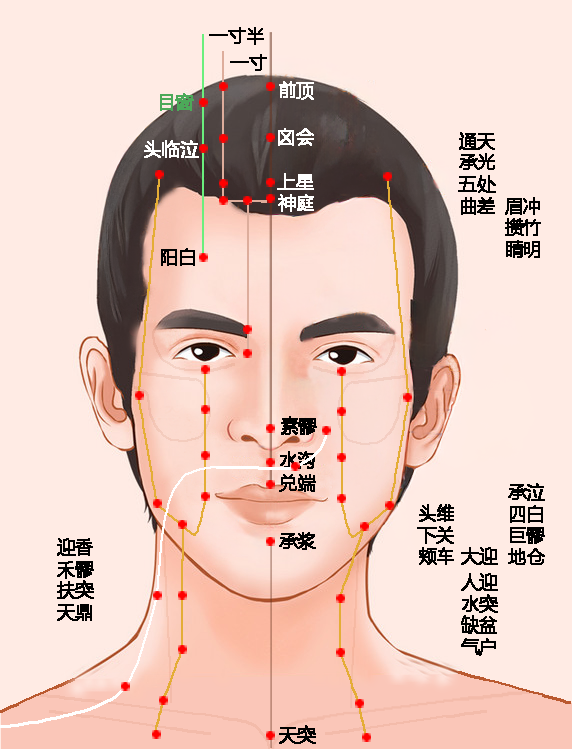
<style>
.page{position:relative;width:572px;height:749px;background:#ffebe4}
.page>*{position:absolute;margin:0}
.t1{font:18px "MicrosoftYaHei";color:#000000;font-weight:bold}
.t2{font:18px "MicrosoftYaHei";color:#ffffff;font-weight:bold}
.t3{font:18px "MicrosoftYaHei";color:#4ca959;font-weight:bold}
</style>
<div class="page">
<p class="t1" style="left:209px;top:27px;width:55px;height:18px">一寸半</p>
<p class="t1" style="left:230px;top:54px;width:37px;height:17px">一寸</p>
<p class="t2" style="left:279px;top:81px;width:35px;height:19px">前顶</p>
<p class="t3" style="left:160px;top:93px;width:34px;height:18px">目窗</p>
<p class="t2" style="left:278px;top:128px;width:36px;height:18px">囟会</p>
<p class="t1" style="left:458px;top:132px;width:38px;height:83px">通天<br>承光<br>五处<br>曲差</p>
<p class="t2" style="left:144px;top:140px;width:55px;height:18px">头临泣</p>
<p class="t2" style="left:277px;top:173px;width:37px;height:17px">上星</p>
<p class="t2" style="left:278px;top:194px;width:36px;height:18px">神庭</p>
<p class="t1" style="left:505px;top:197px;width:36px;height:61px">眉冲<br>攒竹<br>睛明</p>
<p class="t1" style="left:161px;top:248px;width:34px;height:18px">阳白</p>
<p class="t1" style="left:281px;top:416px;width:36px;height:19px">素髎</p>
<p class="t1" style="left:280px;top:451px;width:35px;height:18px">水沟</p>
<p class="t1" style="left:279px;top:474px;width:37px;height:18px">兑端</p>
<p class="t1" style="left:508px;top:483px;width:37px;height:82px">承泣<br>四白<br>巨髎<br>地仓</p>
<p class="t1" style="left:417px;top:504px;width:81px;height:61px">头维<br>下关<br>颊车 大迎</p>
<p class="t1" style="left:279px;top:532px;width:37px;height:18px">承浆</p>
<p class="t1" style="left:57px;top:538px;width:37px;height:83px">迎香<br>禾髎<br>扶突<br>天鼎</p>
<p class="t1" style="left:461px;top:573px;width:37px;height:83px">人迎<br>水突<br>缺盆<br>气户</p>
<p class="t1" style="left:279px;top:725px;width:37px;height:19px">天突</p>
</div>
